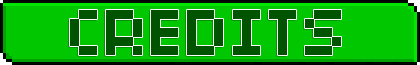
<style>
.page{position:relative;width:420px;height:65px;background:#00c700}
.page>*{position:absolute;margin:0}
.t1{font:72px "04b03";color:#005400}
</style>
<div class="page">
<p class="t1" style="left:70px;top:10px;width:271px;height:45px">CREDITS</p>
</div>
